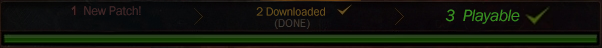
<style>
.page{position:relative;width:602px;height:48px}
.page>*{position:absolute;margin:0}
.t1{font:13px "FranklinGothic-Book";letter-spacing:-0.025em;color:#43292a}
.t2{font:13px "ArialMT";letter-spacing:-0.025em;color:#43292a}
.t3{font:12px "FranklinGothic-Book";letter-spacing:-0.025em;color:#67501e}
.t4{font:17px "FranklinGothic-BookItalic";letter-spacing:-0.025em;color:#398f22}
</style>
<div class="page">
<p class="t1" style="left:71px;top:5px;width:70px;height:11px"><span class="t2">1</span>  New Patch!</p>
<p class="t3" style="left:256px;top:7px;width:69px;height:9px">2 Downloaded</p>
<p class="t4" style="left:445px;top:9px;width:75px;height:15px">3  Playable</p>
</div>
